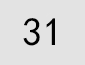
<style>
.page{position:relative;width:85px;height:65px;background:#e3e3e3}
.page>*{position:absolute;margin:0}
.t1{font:40px "SimHei";color:#020202}
</style>
<div class="page">
<p class="t1" style="left:23px;top:18px;width:32px;height:28px">31</p>
</div>
